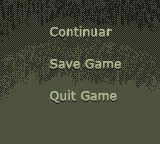
<style>
.page{position:relative;width:160px;height:144px;background:#4d533c}
.page>*{position:absolute;margin:0}
.t1{font:12px "Verdana";color:#afba8f;font-weight:bold}
</style>
<div class="page">
<p class="t1" style="left:50px;top:26px;width:62px;height:11px">Continuar</p>
<p class="t1" style="left:50px;top:59px;width:71px;height:10px">Save Game</p>
<p class="t1" style="left:50px;top:90px;width:67px;height:13px">Quit Game</p>
</div>
